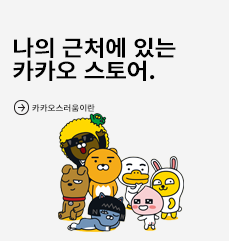
<style>
.page{position:relative;width:229px;height:241px;background:#f4f4f4}
.page>*{position:absolute;margin:0}
.t1{font:22.1px/22.3px "NotoSansKR-Bold";letter-spacing:-0.015em;color:#000000;scale:1.08 1}
.t2{font:8px "NotoSansKR-Bold";letter-spacing:-0.005em;color:#333333;scale:1.08 1}
</style>
<div class="page">
<p class="t1" style="left:13px;top:37px;width:163px;height:44px">나의 근처에 있는<br>카카오 스토어.</p>
<p class="t2" style="left:32px;top:104px;width:63px;height:8px">카카오스러움이란</p>
</div>
